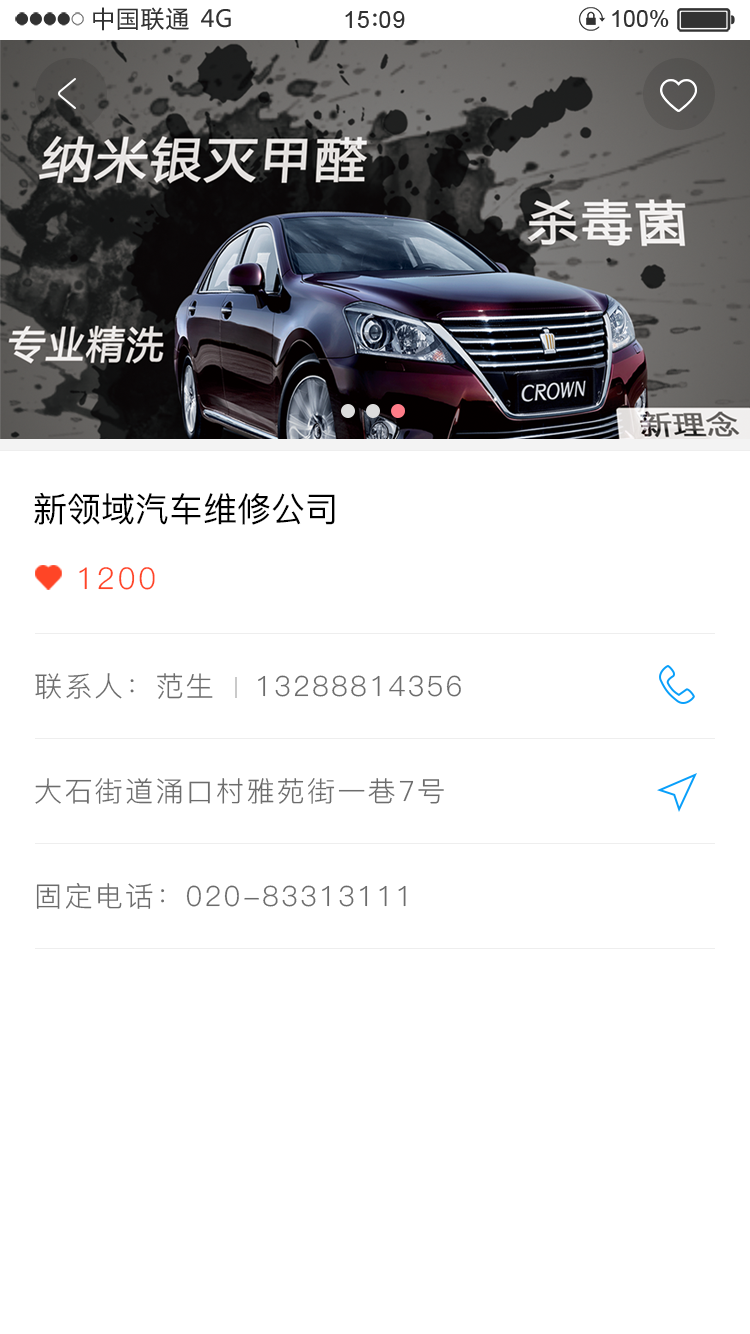
<style>
.page{position:relative;width:750px;height:1334px;background:#ffffff}
.page>*{position:absolute;margin:0}
.t1{font:23.4px "MicrosoftYaHei";letter-spacing:0.06em;color:#323232}
.t2{font:23.4px "MicrosoftYaHei";letter-spacing:0.02em;color:#323232}
.t3{font:23.4px "ArialMT";letter-spacing:0.04em;color:#323232}
.t4{font:23.4px "ArialMT";color:#323232}
.t5{font:34px "PingFang-SC-Medium";color:#000000}
.t6{font:30px "PingFang-SC-Regular";letter-spacing:0.075em;color:#ff4526}
.t7{font:28px "PingFang-SC-Regular";letter-spacing:0.075em;color:#6c6c6c}
</style>
<div class="page">
<p class="t1" style="left:93px;top:7px;width:96px;height:24px">中国联通</p>
<p class="t2" style="left:201px;top:9px;width:30px;height:19px">4G</p>
<p class="t3" style="left:345px;top:11px;width:60px;height:17px">15 09</p>
<p class="t4" style="left:612px;top:10px;width:57px;height:17px">100%</p>
<p class="t5" style="left:34px;top:492px;width:301px;height:33px">新领域汽车维修公司</p>
<p class="t6" style="left:79px;top:567px;width:76px;height:23px">1200</p>
<p class="t7" style="left:35px;top:673px;width:178px;height:27px">联系人：范生</p>
<p class="t7" style="left:258px;top:675px;width:203px;height:22px">13288814356</p>
<p class="t7" style="left:35px;top:778px;width:409px;height:26px">大石街道涌口村雅苑街一巷7号</p>
<p class="t7" style="left:36px;top:883px;width:370px;height:26px">固定电话：020-83313111</p>
</div>
